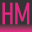
<style>
.page{position:relative;width:32px;height:32px;background:#343434}
.page>*{position:absolute;margin:0}
.t1{font:30px "Bahnschrift-LightCondensed";color:#e12883}
</style>
<div class="page">
<p class="t1" style="left:2px;top:2px;width:28px;height:23px">HM</p>
</div>
